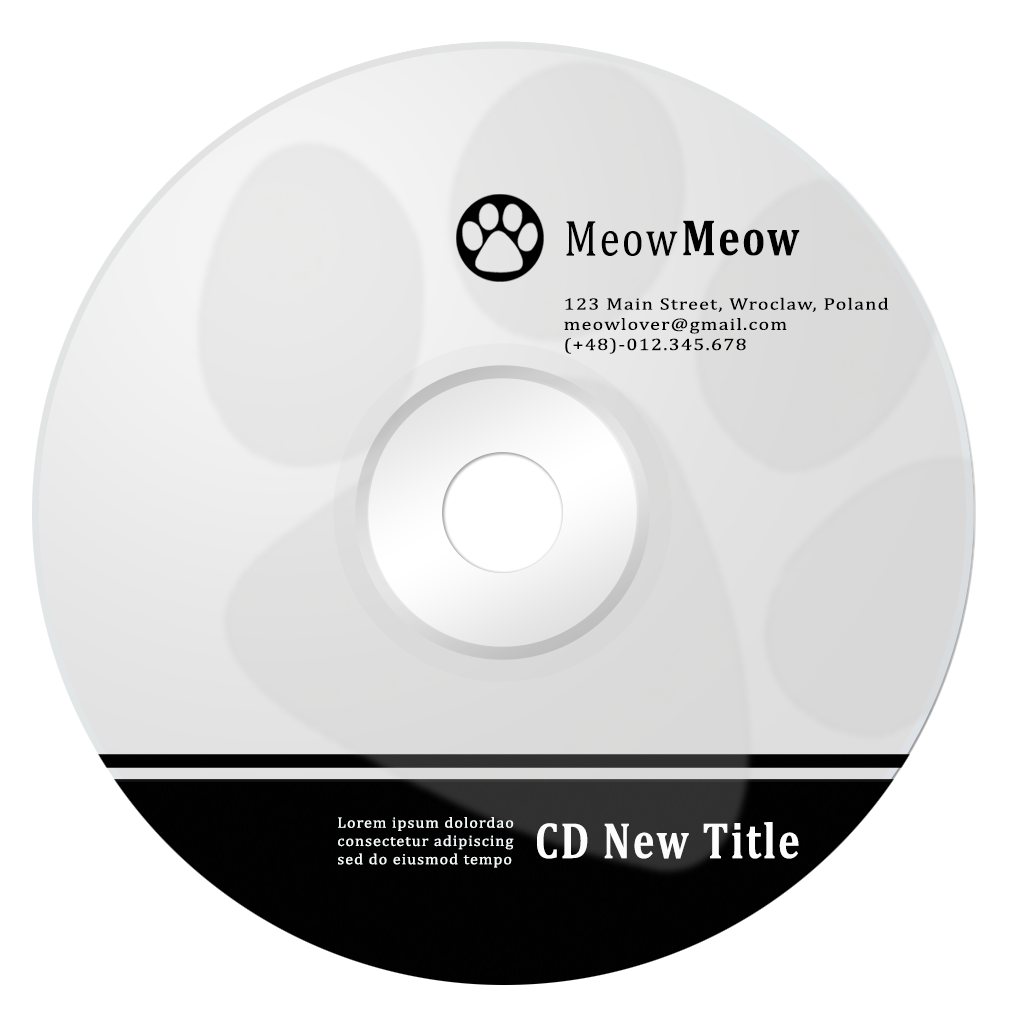
<style>
.page{position:relative;width:1010px;height:1024px;background:#ffffff}
.page>*{position:absolute;margin:0}
.t1{font:51.4px "Cambria";letter-spacing:0.06em;color:#000000;scale:0.79 1}
.t2{font:51.4px "Cambria-Bold";letter-spacing:0.06em;color:#000000;scale:0.79 1}
.t3{font:16.8px "Cambria";letter-spacing:0.06em;color:#000000;scale:1.19 1}
.t4{font:15.2px "Cambria";letter-spacing:0.06em;color:#f3fafa;scale:1.07 1}
.t5{font:51.4px "Cambria-Bold";letter-spacing:0.06em;color:#fcfcfc;scale:0.79 1}
</style>
<div class="page">
<p class="t1" style="left:566px;top:221px;width:112px;height:35px">Meow</p>
<p class="t2" style="left:683px;top:220px;width:117px;height:36px">Meow</p>
<p class="t3" style="left:564px;top:297px;width:325px;height:57px">123 Main Street, Wroclaw, Poland<br>meowlover@gmail.com<br>(+48)-012.345.678</p>
<p class="t4" style="left:338px;top:817px;width:176px;height:51px;text-align:justify">Lorem ipsum dolordao<br>consectetur adipiscing<br>sed do eiusmod tempo</p>
<p class="t5" style="left:537px;top:822px;width:262px;height:37px">CD New Title</p>
</div>
